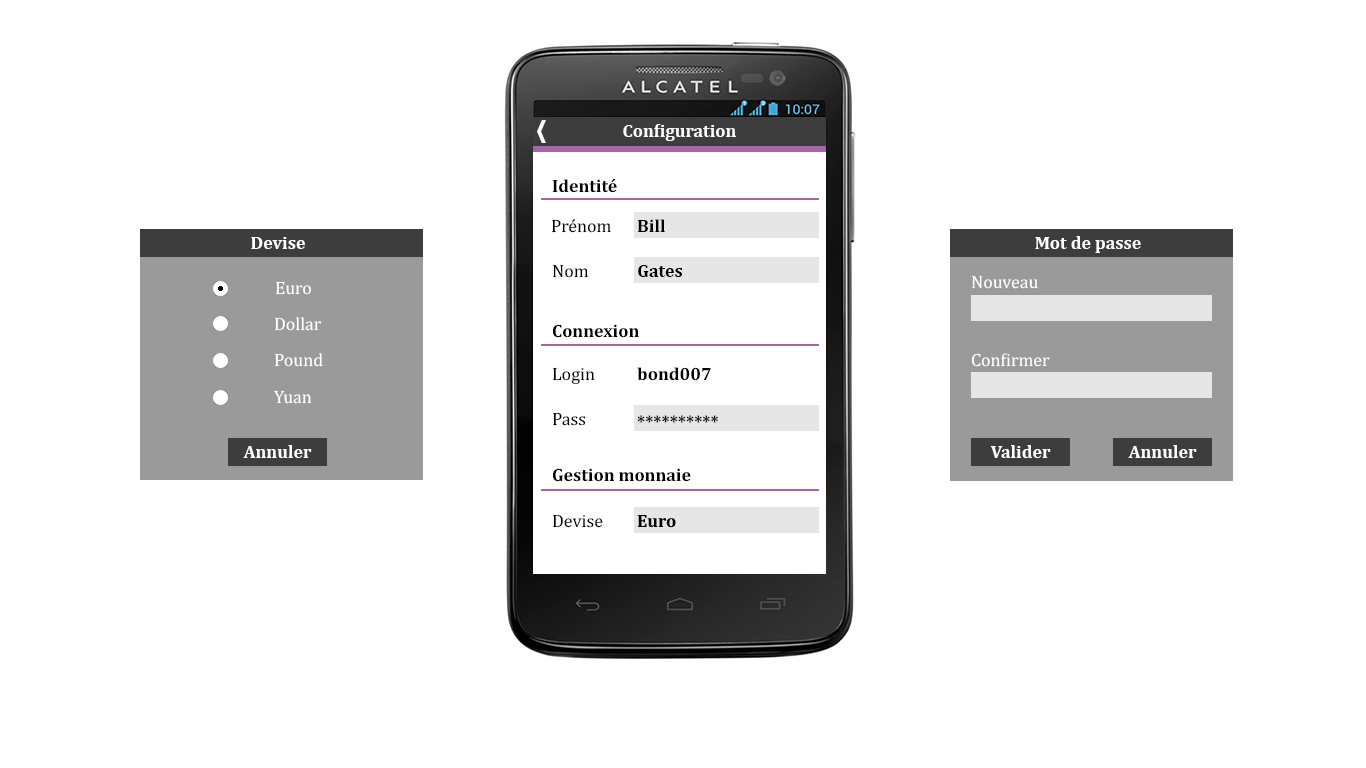
<style>
.page{position:relative;width:1366px;height:768px;background:#ffffff}
.page>*{position:absolute;margin:0}
.t1{font:18px "Cambria-Bold";color:#ffffff}
.t2{font:18px "Cambria-Bold";color:#000000}
.t3{font:18px "Cambria";color:#000000}
.t4{font:18px "Cambria";color:#ffffff}
</style>
<div class="page">
<p class="t1" style="left:623px;top:124px;width:113px;height:17px">Configuration</p>
<p class="t2" style="left:552px;top:179px;width:65px;height:14px">Identité</p>
<p class="t3" style="left:552px;top:219px;width:59px;height:14px">Prénom</p>
<p class="t2" style="left:637px;top:219px;width:28px;height:13px">Bill</p>
<p class="t1" style="left:251px;top:237px;width:54px;height:12px">Devise</p>
<p class="t1" style="left:1035px;top:236px;width:106px;height:17px">Mot de passe</p>
<p class="t3" style="left:553px;top:264px;width:35px;height:14px">Nom</p>
<p class="t2" style="left:638px;top:265px;width:44px;height:12px">Gates</p>
<p class="t4" style="left:276px;top:281px;width:35px;height:14px">Euro</p>
<p class="t4" style="left:972px;top:275px;width:66px;height:14px">Nouveau</p>
<p class="t4" style="left:275px;top:317px;width:47px;height:14px">Dollar</p>
<p class="t2" style="left:553px;top:324px;width:86px;height:14px">Connexion</p>
<p class="t4" style="left:275px;top:353px;width:48px;height:14px">Pound</p>
<p class="t4" style="left:971px;top:353px;width:79px;height:14px">Confirmer</p>
<p class="t3" style="left:553px;top:367px;width:42px;height:18px">Login</p>
<p class="t2" style="left:637px;top:367px;width:74px;height:14px">bond007</p>
<p class="t4" style="left:274px;top:390px;width:38px;height:14px">Yuan</p>
<p class="t3" style="left:553px;top:412px;width:33px;height:14px">Pass</p>
<p class="t2" style="left:637px;top:415px;width:81px;height:8px">**********</p>
<p class="t1" style="left:243px;top:445px;width:69px;height:13px">Annuler</p>
<p class="t1" style="left:990px;top:445px;width:61px;height:13px">Valider</p>
<p class="t1" style="left:1128px;top:445px;width:69px;height:13px">Annuler</p>
<p class="t2" style="left:553px;top:468px;width:138px;height:14px">Gestion monnaie</p>
<p class="t3" style="left:553px;top:514px;width:50px;height:14px">Devise</p>
</div>
